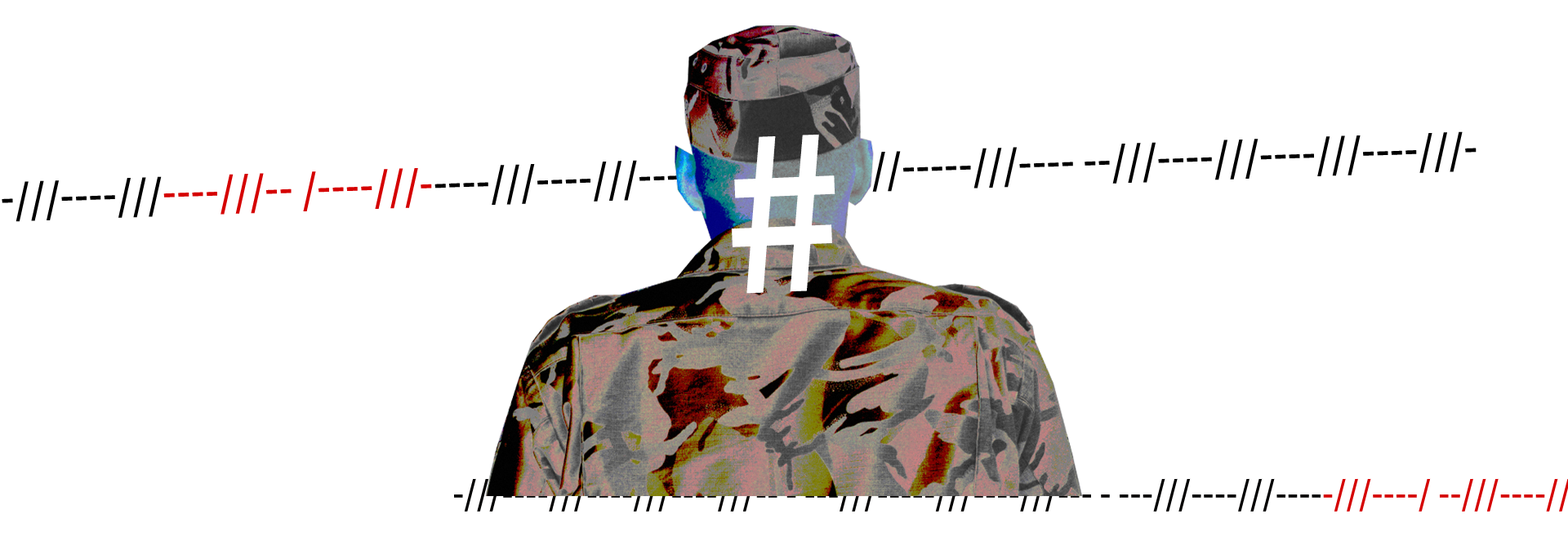
<style>
.page{position:relative;width:1568px;height:541px;background:#ffffff}
.page>*{position:absolute;margin:0}
.t1{font:45.4px "SourceSansRoman-Semibold";color:#000000}
.t2{font:45.4px "SourceSansRoman-Semibold";color:#d50000}
.t3{font:239.3px "SourceSansRoman-Semibold";color:#ffffff}
</style>
<div class="page">
<p class="t1" style="left:2px;top:131px;width:1475px;height:91px;rotate:178deg">-///----///----///----///-- ----///-----///----///--- - ---///----///----<span class="t2">-///----/ --///----</span>///----///-</p>
<p class="t3" style="left:732px;top:134px;width:103px;height:160px;rotate:-2deg">#</p>
</div>
